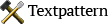
<style>
.page{position:relative;width:108px;height:24px;background:#ffffff}
.page>*{position:absolute;margin:0}
.t1{font:16px "PTSerif-Regular";letter-spacing:-0.025em;color:#000000}
</style>
<div class="page">
<p class="t1" style="left:28px;top:5px;width:80px;height:14px">Textpattern</p>
</div>
